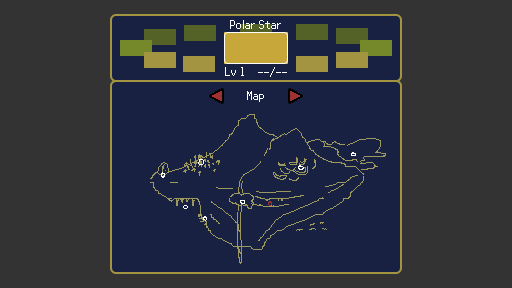
<style>
.page{position:relative;width:512px;height:288px;background:#333333}
.page>*{position:absolute;margin:0}
.t1{font:13px "Power-Green";color:#ffffff}
</style>
<div class="page">
<p class="t1" style="left:230px;top:20px;width:51px;height:9px">Polar Star</p>
<p class="t1" style="left:225px;top:67px;width:19px;height:9px">Lv 1</p>
<p class="t1" style="left:258px;top:67px;width:29px;height:10px">--/--</p>
<p class="t1" style="left:247px;top:91px;width:17px;height:11px">Map</p>
</div>
